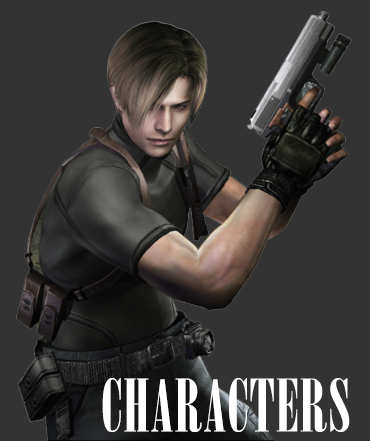
<style>
.page{position:relative;width:370px;height:441px;background:#333333}
.page>*{position:absolute;margin:0}
.t1{font:72px "Onyx";letter-spacing:0.025em;color:#ffffff}
</style>
<div class="page">
<p class="t1" style="left:102px;top:378px;width:248px;height:54px">CHARACTERS</p>
</div>
